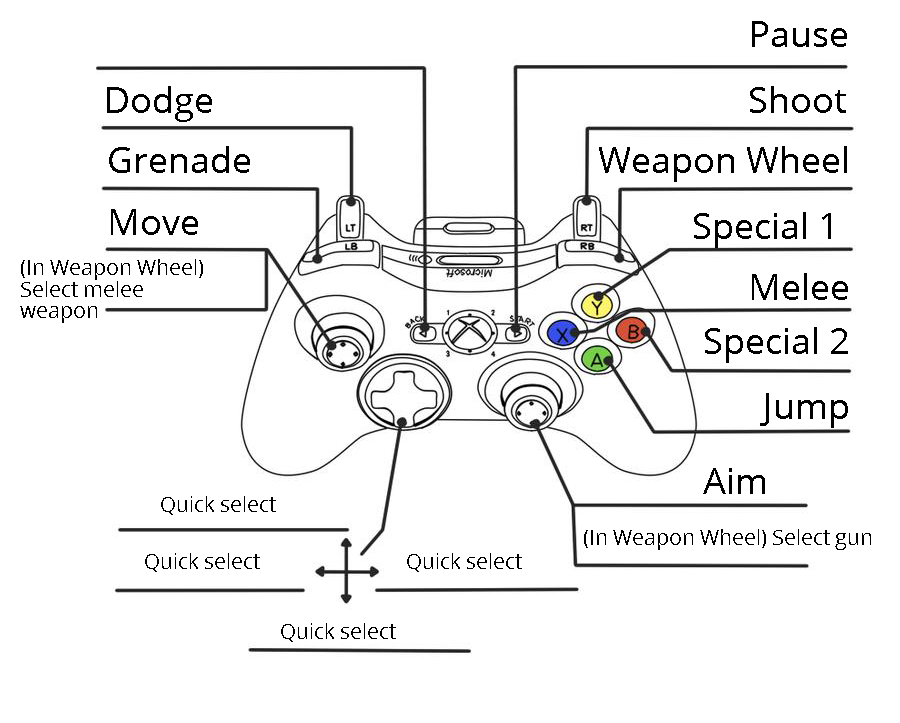
<style>
.page{position:relative;width:900px;height:723px;background:#ffffff}
.page>*{position:absolute;margin:0}
.t1{font:35.6px "OpenSans";color:#000000}
.t2{font:21.3px/21.3px "OpenSans";color:#000000}
.t3{font:21.3px "OpenSans";color:#000000}
</style>
<div class="page">
<p class="t1" style="left:752px;top:21px;width:95px;height:26px">Pause</p>
<p class="t1" style="left:107px;top:86px;width:105px;height:36px">Dodge</p>
<p class="t1" style="left:750px;top:86px;width:96px;height:27px">Shoot</p>
<p class="t1" style="left:109px;top:146px;width:141px;height:27px">Grenade</p>
<p class="t1" style="left:599px;top:146px;width:248px;height:36px">Weapon Wheel</p>
<p class="t1" style="left:111px;top:209px;width:87px;height:26px">Move</p>
<p class="t1" style="left:694px;top:212px;width:137px;height:36px">Special 1</p>
<p class="t2" style="left:20px;top:259px;width:183px;height:64px">(In Weapon Wheel) Select melee weapon</p>
<p class="t1" style="left:752px;top:273px;width:96px;height:27px">Melee</p>
<p class="t1" style="left:705px;top:327px;width:143px;height:36px">Special 2</p>
<p class="t1" style="left:760px;top:393px;width:88px;height:35px">Jump</p>
<p class="t1" style="left:703px;top:468px;width:62px;height:26px">Aim</p>
<p class="t3" style="left:161px;top:496px;width:115px;height:19px">Quick select</p>
<p class="t3" style="left:584px;top:529px;width:287px;height:21px">(In Weapon Wheel) Select gun</p>
<p class="t3" style="left:145px;top:553px;width:115px;height:19px">Quick select</p>
<p class="t3" style="left:407px;top:553px;width:115px;height:19px">Quick select</p>
<p class="t3" style="left:281px;top:623px;width:115px;height:19px">Quick select</p>
</div>
